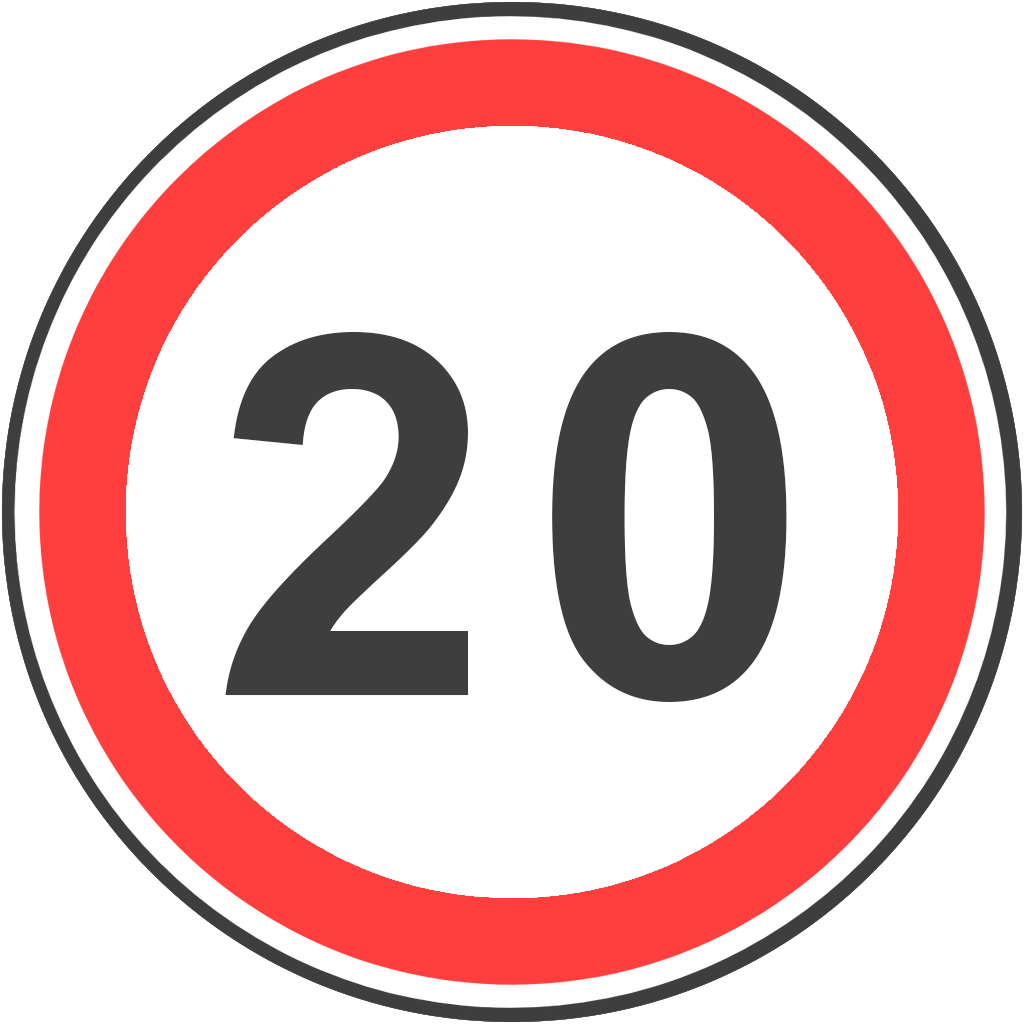
<style>
.page{position:relative;width:1024px;height:1024px;background:#ffffff}
.page>*{position:absolute;margin:0}
.t1{font:504.2px "Arial-BoldMT";letter-spacing:0.075em;color:#3e3e3e}
</style>
<div class="page">
<p class="t1" style="left:225px;top:332px;width:562px;height:370px">20</p>
</div>
